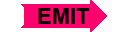
<style>
.page{position:relative;width:128px;height:32px;background:#ffffff}
.page>*{position:absolute;margin:0}
.t1{font:22px "Arial-BoldMT";color:#000000}
</style>
<div class="page">
<p class="t1" style="left:38px;top:8px;width:52px;height:16px">EMIT</p>
</div>
